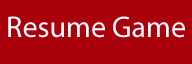
<style>
.page{position:relative;width:192px;height:64px;background:#aa000c}
.page>*{position:absolute;margin:0}
.t1{font:30px "MyriadPro-Regular";color:#ffffff}
</style>
<div class="page">
<p class="t1" style="left:8px;top:16px;width:177px;height:22px">Resume Game</p>
</div>
